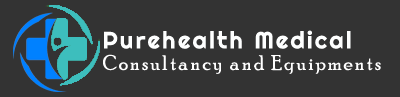
<style>
.page{position:relative;width:400px;height:97px;background:#333333}
.page>*{position:absolute;margin:0}
.t1{font:23.5px "Righteous-Regular";letter-spacing:0.1em;color:#feffff}
.t2{font:20.8px "PoorRichard-Regular";letter-spacing:0.1em;color:#ffffff}
</style>
<div class="page">
<p class="t1" style="left:104px;top:30px;width:247px;height:19px">Purehealth Medical</p>
<p class="t2" style="left:103px;top:54px;width:278px;height:20px">Consultancy and Equipments</p>
</div>
